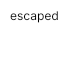
<style>
.page{position:relative;width:64px;height:64px;background:#ffffff}
.page>*{position:absolute;margin:0}
.t1{font:12px "Inter-Regular-Regular";color:#000000}
</style>
<div class="page">
<p class="t1" style="left:10px;top:11px;width:48px;height:12px">escaped</p>
</div>
